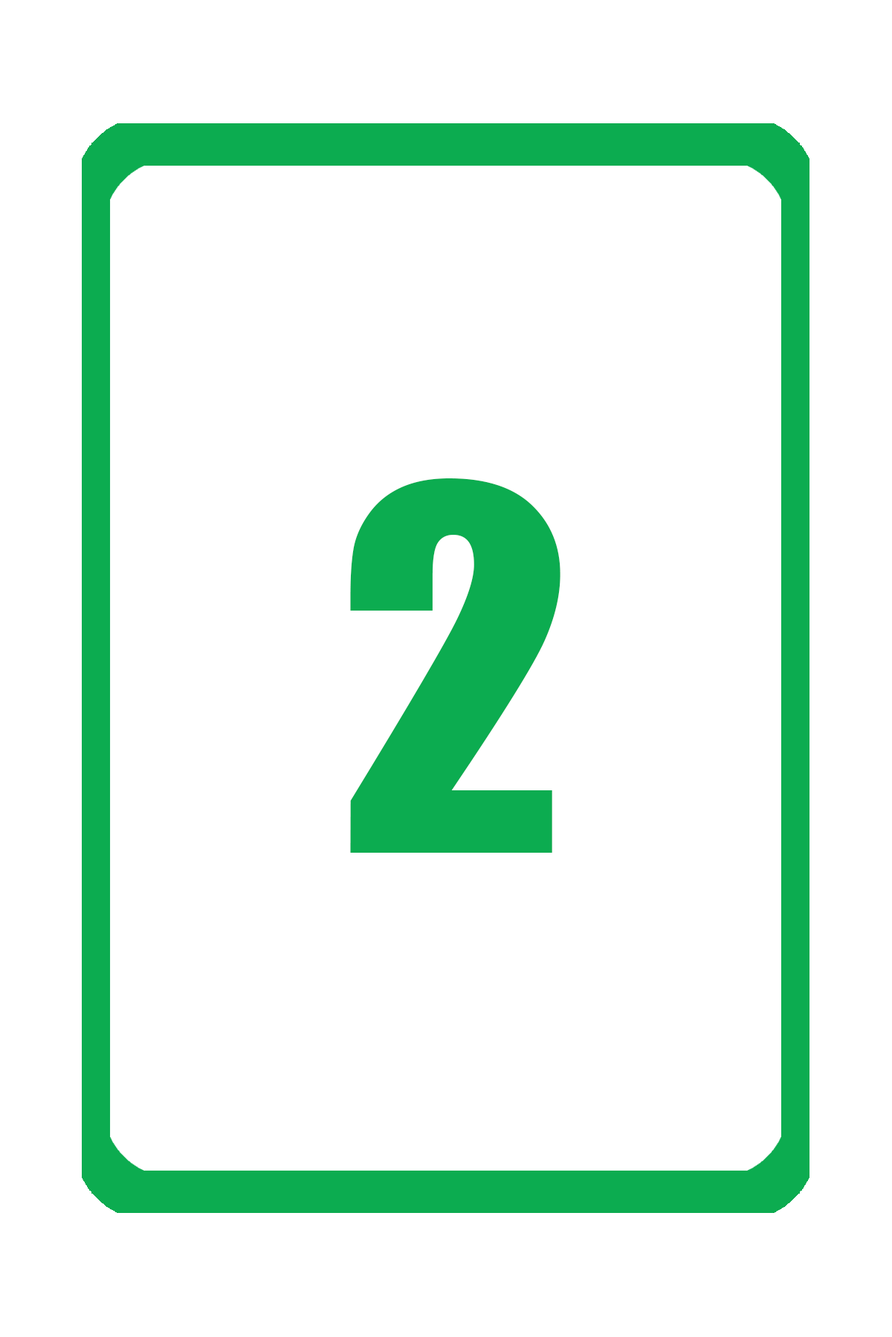
<style>
.page{position:relative;width:892px;height:1337px;background:#ffffff}
.page>*{position:absolute;margin:0}
.t1{font:464.4px "Impact";color:#0cac50}
</style>
<div class="page">
<p class="t1" style="left:350px;top:478px;width:210px;height:375px">2</p>
</div>
